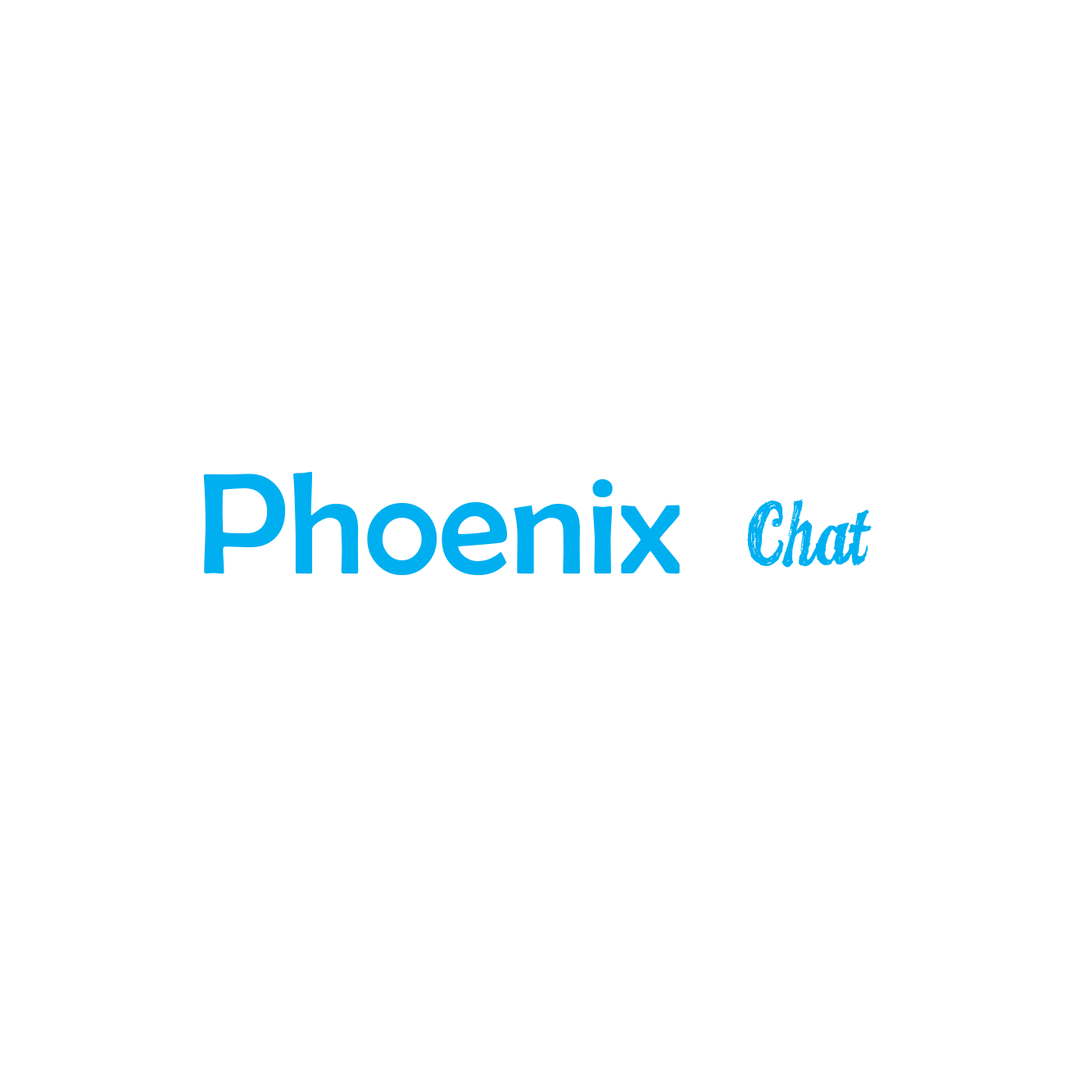
<style>
.page{position:relative;width:1092px;height:1092px;background:#ffffff}
.page>*{position:absolute;margin:0}
.t1{font:146.2px "BerlinSansFB-Reg";color:#00aff0}
.t2{font:134.8px "CANDYINC";color:#00aff0}
</style>
<div class="page">
<p class="t1" style="left:203px;top:472px;width:477px;height:103px">Phoenix</p>
<p class="t2" style="left:747px;top:499px;width:125px;height:69px">Chat</p>
</div>
